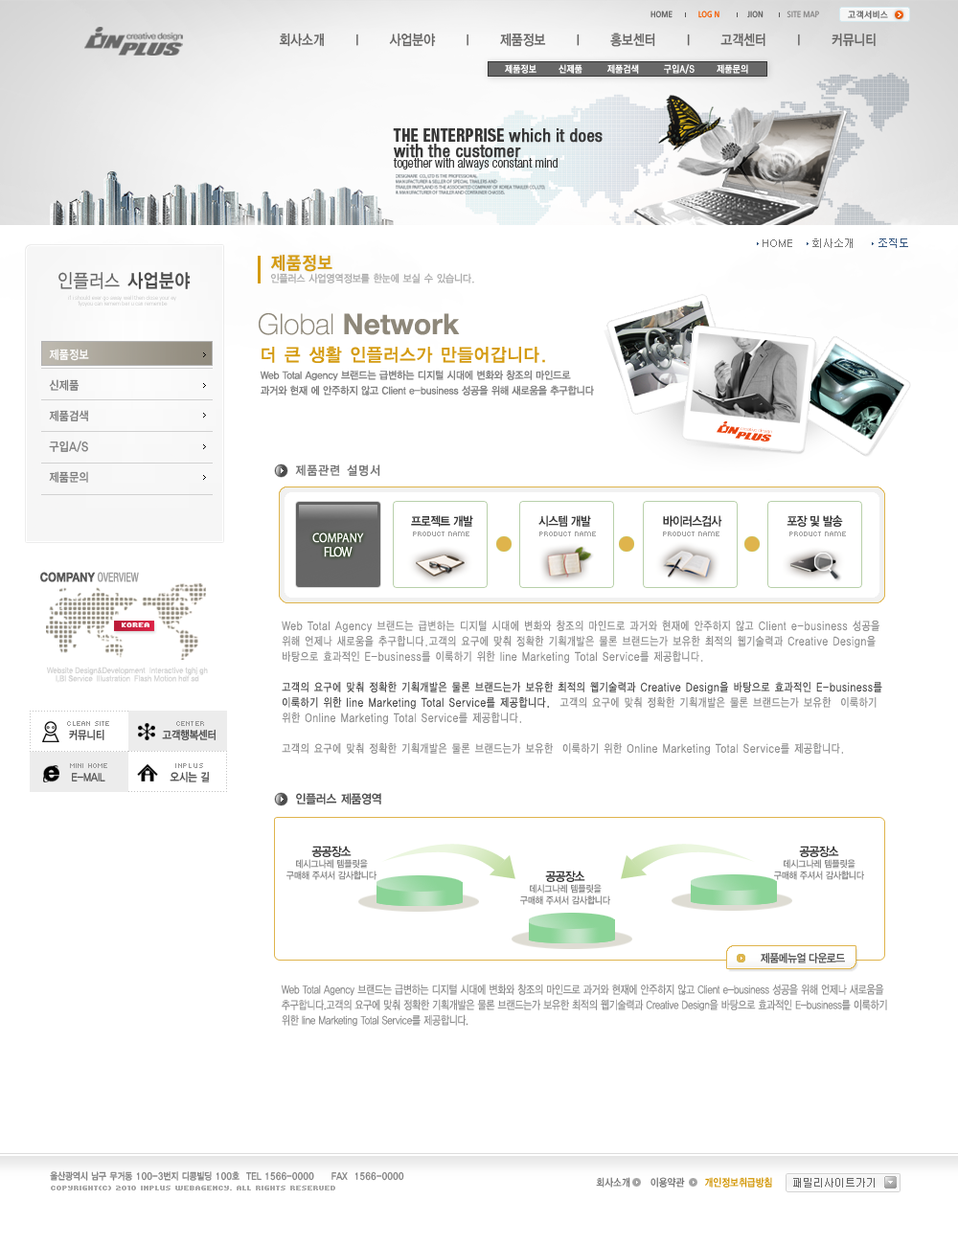
<style>
.page{position:relative;width:958px;height:1245px;background:#ffffff}
.page>*{position:absolute;margin:0}
.t1{font:8.6px "Moebius";color:#8d8c8c;text-transform:uppercase;scale:0.9 1}
.t2{font:8.6px "Moebius";color:#636363;text-transform:uppercase;scale:0.9 1}
.t3{font:8.6px "Moebius";color:#f55d00;text-transform:uppercase;scale:0.9 1}
.t4{font:8.6px "YGO530";letter-spacing:0.04em;color:#656565}
.t5{font:14.4px "YGO33";letter-spacing:-0.075em;color:#646362;scale:0.85 1}
.t6{font:9.6px "YGO540";letter-spacing:0.02em;color:#ffffff;scale:0.9 1}
.t7{font:17.8px/15.8px "HelveticaNeue-Condensed";color:#373737;font-weight:bold}
.t8{font:17.8px/15.8px "HelveticaNeue-HeavyCond";color:#373737;text-transform:uppercase;scale:0.9 1}
.t9{font:13.2px "HelveticaNeue-LightCond";color:#373737}
.t10{font:10.5px "Dotum";color:#777777}
.t11{font:10.5px "Dotum";color:#345680}
.t12{font:18.1px "YGO33";letter-spacing:-0.025em;color:#d49b11;font-weight:bold;scale:0.86 1}
.t13{font:19.1px "YGO32";letter-spacing:-0.045em;color:#656565;text-transform:uppercase;scale:0.86 1}
.t14{font:19.1px "YGO34";letter-spacing:-0.045em;color:#4c4c4c;text-transform:uppercase;scale:0.86 1}
.t15{font:10.5px "YGO33";letter-spacing:-0.09em;color:#adadad;scale:0.9 1}
.t16{font:5.7px/5.7px "Univers-Light";scale:0.9 1}
.t17{font:28.7px "HelveticaNeue-Bold";color:#8e887a}
.t18{font:28.7px "HelveticaNeue-Thin";color:#8e887a}
.t19{font:12.1px/30.6px "YGO33";letter-spacing:-0.04em;color:#7c7c7c;scale:0.86 1}
.t20{font:12.1px/30.6px "YGO33";letter-spacing:-0.04em;color:#ffffff;scale:0.86 1}
.t21{font:18.1px "YGO33";letter-spacing:-0.04em;color:#d49b11;scale:0.95 1}
.t22{font:10.5px/15.3px "YDIYGO330";color:#808080;scale:0.9 1}
.t23{font:12.5px "YGO33";letter-spacing:0.02em;color:#6f6f6f;scale:0.9 1}
.t24{font:12.5px "YDIYGO340";letter-spacing:-0.05em;color:#373737;scale:0.9 1}
.t25{font:13.1px/14.4px "MyriadPro-Regular";color:#ffffff;scale:0.9 1}
.t26{font:14.1px/14.4px "MyriadPro-Regular";letter-spacing:-0.075em;color:#ffffff;scale:0.9 1}
.t27{font:7.7px "Kroeger0555";color:#a0a0a0}
.t28{font:12.6px "HelveticaNeue-Condensed";color:#9c9c9c;scale:0.85 1}
.t29{font:12.6px "HelveticaNeue-Bold";color:#585858;scale:0.85 1}
.t30{font:7.7px "Kroeger0555";color:#ffffff;font-weight:bold}
.t31{font:11.5px/15.3px "YGO32";color:#8d8d8d;scale:0.8 1}
.t32{font:11.5px/15.3px "YGO32";color:#4b4b4b;scale:0.8 1}
.t33{font:8.1px/8.1px "HelveticaNeue-Roman";color:#d4d4d4;scale:0.9 1}
.t34{font:7.7px "Kroeger0556";letter-spacing:-0.1em;color:#989898}
.t35{font:7.7px "Kroeger0556";letter-spacing:-0.1em;color:#989898;text-transform:uppercase}
.t36{font:11.5px "YDIYGO330";color:#4c4c4c;scale:0.85 1}
.t37{font:11.5px "YDIYGO330";color:#4c4c4c;text-transform:uppercase;scale:0.85 1}
.t38{font:7.7px "Kroeger0556";letter-spacing:-0.04em;color:#989898}
.t39{font:12.5px "YGO33";letter-spacing:-0.09em;color:#4b4b4b;scale:0.9 1}
.t40{font:9.6px/11.5px "YDIYGO340";letter-spacing:-0.025em;color:#8a8a8a;scale:0.9 1}
.t41{font:12.5px/11.5px "YDIYGO340";letter-spacing:-0.05em;color:#373737;scale:0.9 1}
.t42{font:11.5px "YDIYGO340";letter-spacing:-0.05em;color:#555555;scale:0.9 1}
.t43{font:11.5px/15.3px "YDIYGO320";color:#8d8d8d;scale:0.8 1}
.t44{font:9.6px "YGO33";letter-spacing:-0.075em;color:#828282;scale:0.85 1}
.t45{font:10.5px "YGO33";letter-spacing:-0.05em;color:#757575;scale:0.85 1}
.t46{font:10.5px "YGO33";letter-spacing:-0.05em;color:#d19400;scale:0.85 1}
.t47{font:10.5px "Dotum";color:#656565}
.t48{font:7.7px "Kroeger0555";color:#aaaaaa;font-weight:bold}
</style>
<div class="page">
<p class="t1" style="left:650px;top:11px;width:169px;height:7px"><span class="t2">Home             </span><span class="t3">Log n              </span><span class="t2">Jion</span>            Site map</p>
<p class="t4" style="left:848px;top:11px;width:40px;height:8px">고객서비스</p>
<p class="t5" style="left:279px;top:33px;width:596px;height:14px">회사소개      l      사업분야      l      제품정보      l      홍보센터      l      고객센터      l      커뮤니티</p>
<p class="t6" style="left:505px;top:64px;width:243px;height:10px">제품정보        신제품         제품검색         구입A/S        제품문의</p>
<p class="t7" style="left:393px;top:128px;width:209px;height:30px"><span class="t8"><br>The enterprise </span>which it does<br>with the customer</p>
<p class="t9" style="left:393px;top:158px;width:164px;height:12px">together with always constant mind</p>
<p class="t10" style="left:762px;top:238px;width:146px;height:10px">HOME     회사소개      <span class="t11">조직도</span></p>
<p class="t12" style="left:271px;top:254px;width:61px;height:18px">제품정보</p>
<p class="t13" style="left:58px;top:272px;width:133px;height:17px">인플러스 <span class="t14">사업분야</span></p>
<p class="t15" style="left:270px;top:273px;width:204px;height:10px">인플러스 사업영역정보를 한눈에 보실 수 있습니다.</p>
<p class="t16" style="left:68px;top:295px;width:108px;height:12px;text-align:center">if i should ever go away well then close your ey<br>fyoyou can remem ber u can remembe</p>
<p class="t17" style="left:259px;top:313px;width:201px;height:22px"><span class="t18">Global </span>Network</p>
<p class="t19" style="left:49px;top:349px;width:40px;height:134px"><span class="t20">제품정보<br></span>신제품<br>제품검색<br>구입A/S<br>제품문의</p>
<p class="t21" style="left:261px;top:346px;width:284px;height:17px">더 큰 생활 인플러스가 만들어갑니다.</p>
<p class="t22" style="left:260px;top:370px;width:334px;height:26px">Web Total Agency 브랜드는 급변하는 디지털 시대에 변화와 창조의 마인드로 <br>과거와 현재 에 안주하지 않고 Client e-business 성공을 위해 새로움을 추구합니다</p>
<p class="t23" style="left:295px;top:465px;width:85px;height:12px">제품관련 설명서</p>
<p class="t24" style="left:411px;top:515px;width:432px;height:12px">프로젝트 개발                    시스템 개발                      바이러스검사                    포장 및 발송</p>
<p class="t25" style="left:312px;top:533px;width:52px;height:24px;text-align:center">COMPANY<br><span class="t26">FLOW</span></p>
<p class="t27" style="left:413px;top:532px;width:433px;height:4px">product name                        product name                       product name                        product name</p>
<p class="t28" style="left:40px;top:572px;width:99px;height:10px"><span class="t29">COMPANY</span> OVERVIEW</p>
<p class="t30" style="left:122px;top:623px;width:27px;height:4px">korea</p>
<p class="t31" style="left:282px;top:621px;width:600px;height:135px">Web Total Agency 브랜드는 급변하는 디지털 시대에 변화와 창조의 마인드로 과거와 현재에 안주하지 않고 Client e-business 성공을 위해 언제나 새로움을 추구합니다.고객의 요구에 맞춰 정확한 기획개발은 물론 브랜드는가 보유한 최적의 웹기술력과 Creative Design을 바탕으로 효과적인 E-business를 이룩하기 위한 line Marketing Total Service를 제공합니다.<br><br><span class="t32">고객의 요구에 맞춰 정확한 기획개발은 물론 브랜드는가 보유한 최적의 웹기술력과 Creative Design을 바탕으로 효과적인 E-business를 이룩하기 위한 line Marketing Total Service를 제공합니다.  </span>고객의 요구에 맞춰 정확한 기획개발은 물론 브랜드는가 보유한  이룩하기 위한 Online Marketing Total Service를 제공합니다.<br><br>고객의 요구에 맞춰 정확한 기획개발은 물론 브랜드는가 보유한  이룩하기 위한 Online Marketing Total Service를 제공합니다.</p>
<p class="t33" style="left:46px;top:667px;width:162px;height:16px;text-align:center">Website Design&amp;Development  Interactive tghj gh<br>I,BI Service  Illustration  Flash Motion hdf sd</p>
<p class="t34" style="left:67px;top:721px;width:42px;height:5px">CLEAN SITE</p>
<p class="t35" style="left:176px;top:721px;width:28px;height:5px">center</p>
<p class="t36" style="left:69px;top:729px;width:35px;height:11px">커뮤니티</p>
<p class="t36" style="left:162px;top:729px;width:53px;height:12px">고객행복센터</p>
<p class="t34" style="left:70px;top:763px;width:37px;height:5px">MINI HOME</p>
<p class="t37" style="left:72px;top:773px;width:33px;height:9px">E-mail</p>
<p class="t36" style="left:170px;top:771px;width:40px;height:11px">오시는 길</p>
<p class="t38" style="left:175px;top:763px;width:28px;height:5px">INPLUS</p>
<p class="t39" style="left:296px;top:793px;width:85px;height:12px">인플러스 제품영역</p>
<p class="t40" style="left:286px;top:846px;width:90px;height:34px;text-align:center"><span class="t41">공공장소   <br></span>데시그나레 템플릿을 <br>구매해 주셔서 감사합니다</p>
<p class="t40" style="left:774px;top:846px;width:90px;height:34px;text-align:center"><span class="t41">공공장소   <br></span>데시그나레 템플릿을 <br>구매해 주셔서 감사합니다</p>
<p class="t40" style="left:520px;top:871px;width:90px;height:34px;text-align:center"><span class="t41">공공장소   <br></span>데시그나레 템플릿을 <br>구매해 주셔서 감사합니다</p>
<p class="t42" style="left:760px;top:953px;width:85px;height:10px">제품메뉴얼 다운로드</p>
<p class="t43" style="left:281px;top:984px;width:606px;height:43px">Web Total Agency 브랜드는 급변하는 디지털 시대에 변화와 창조의 마인드로 과거와 현재에 안주하지 않고 Client e-business 성공을 위해 언제나 새로움을 추구합니다.고객의 요구에 맞춰 정확한 기획개발은 물론 브랜드는가 보유한 최적의 웹기술력과 Creative Design을 바탕으로 효과적인 E-business를 이룩하기 위한 line Marketing Total Service를 제공합니다.</p>
<p class="t44" style="left:50px;top:1171px;width:354px;height:10px">울산광역시 남구 무거동 100-3번지 디콩빌딩 100호  TEL 1566-0000     FAX  1566-0000</p>
<p class="t45" style="left:596px;top:1177px;width:176px;height:11px">회사소개     이용약관    <span class="t46"> 개인정보취급방침</span></p>
<p class="t47" style="left:793px;top:1178px;width:81px;height:10px">패밀리사이트가기</p>
<p class="t48" style="left:51px;top:1186px;width:284px;height:4px">COPYRIGHT(C) 2010 INPLUS WEBAGENCY. ALL RIGHTS RESERVED</p>
</div>
